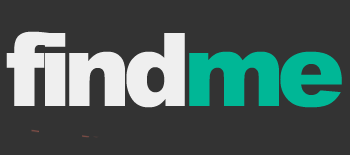
<style>
.page{position:relative;width:350px;height:155px;background:#333333}
.page>*{position:absolute;margin:0}
.t1{font:102px "Arial-Black";letter-spacing:-0.08em;color:#efefef}
.t2{font:102px "Arial-Black";letter-spacing:-0.08em;color:#00b796}
</style>
<div class="page">
<p class="t1" style="left:6px;top:31px;width:336px;height:77px">find<span class="t2">me</span></p>
</div>
